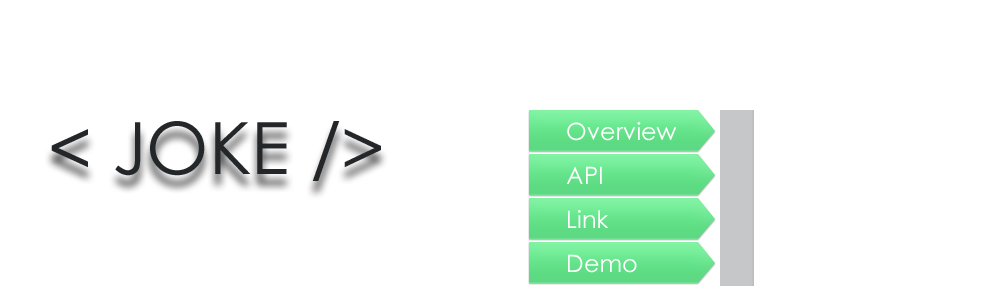
<style>
.page{position:relative;width:1000px;height:300px;background:#ffffff}
.page>*{position:absolute;margin:0}
.t1{font:72px "CenturyGothic";color:#232729}
.t2{font:24px "CenturyGothic";color:#ffffff}
</style>
<div class="page">
<p class="t1" style="left:51px;top:121px;width:330px;height:60px">&lt; JOKE /&gt;</p>
<p class="t2" style="left:567px;top:122px;width:110px;height:19px">Overview</p>
<p class="t2" style="left:566px;top:166px;width:36px;height:18px">API</p>
<p class="t2" style="left:568px;top:210px;width:41px;height:18px">Link</p>
<p class="t2" style="left:568px;top:254px;width:69px;height:19px">Demo</p>
</div>
